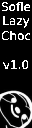
<style>
.page{position:relative;width:32px;height:128px;background:#000000}
.page>*{position:absolute;margin:0}
.t1{font:12px "DejaVuSans";color:#ffffff}
</style>
<div class="page">
<p class="t1" style="left:1px;top:1px;width:30px;height:69px;text-align:center">Sofle<br>Lazy<br>Choc<br><br>v1.0</p>
</div>
